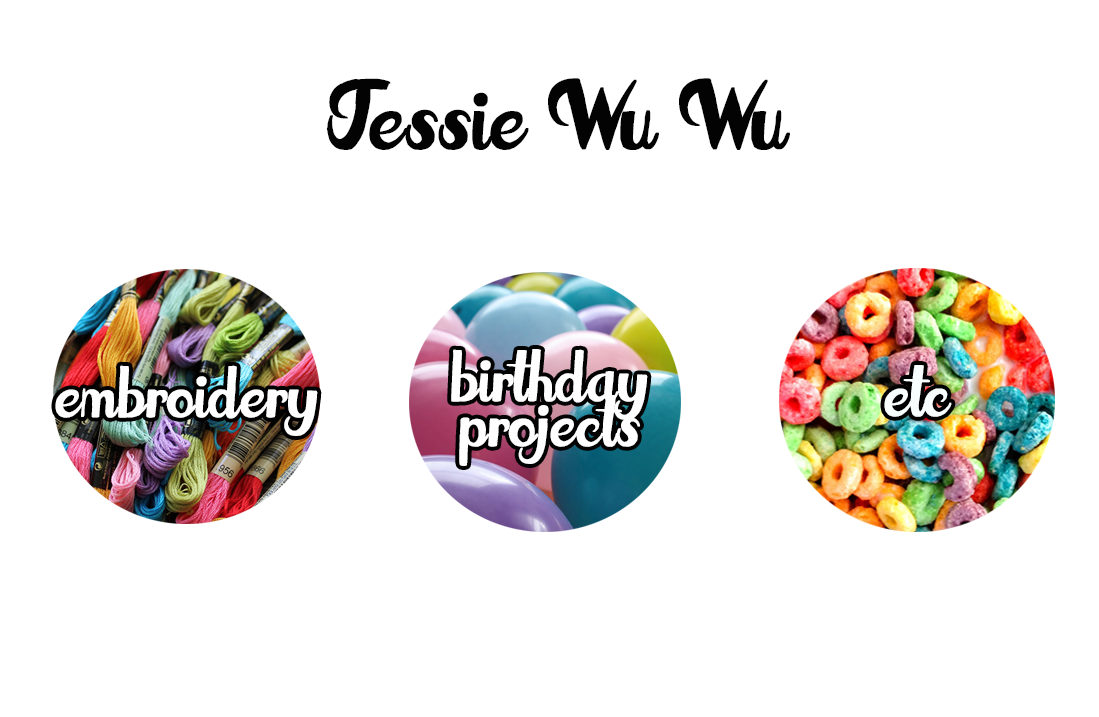
<style>
.page{position:relative;width:1099px;height:717px;background:#ffffff}
.page>*{position:absolute;margin:0}
.t1{font:76px "FatTats";color:#030303;font-weight:bold}
.t2{font:55px/45px "FatTats";color:#fefefe;font-weight:bold}
.t3{font:55px "FatTats";color:#fefefe;font-weight:bold}
.t4{font:55px "FatTats";color:#f8fdfd;font-weight:bold}
</style>
<div class="page">
<p class="t1" style="left:327px;top:78px;width:463px;height:72px">Jessie Wu Wu</p>
<p class="t2" style="left:451px;top:349px;width:197px;height:117px;text-align:center">birthday<br>projects</p>
<p class="t3" style="left:55px;top:365px;width:263px;height:71px">embroidery</p>
<p class="t4" style="left:884px;top:365px;width:68px;height:52px">etc</p>
</div>
